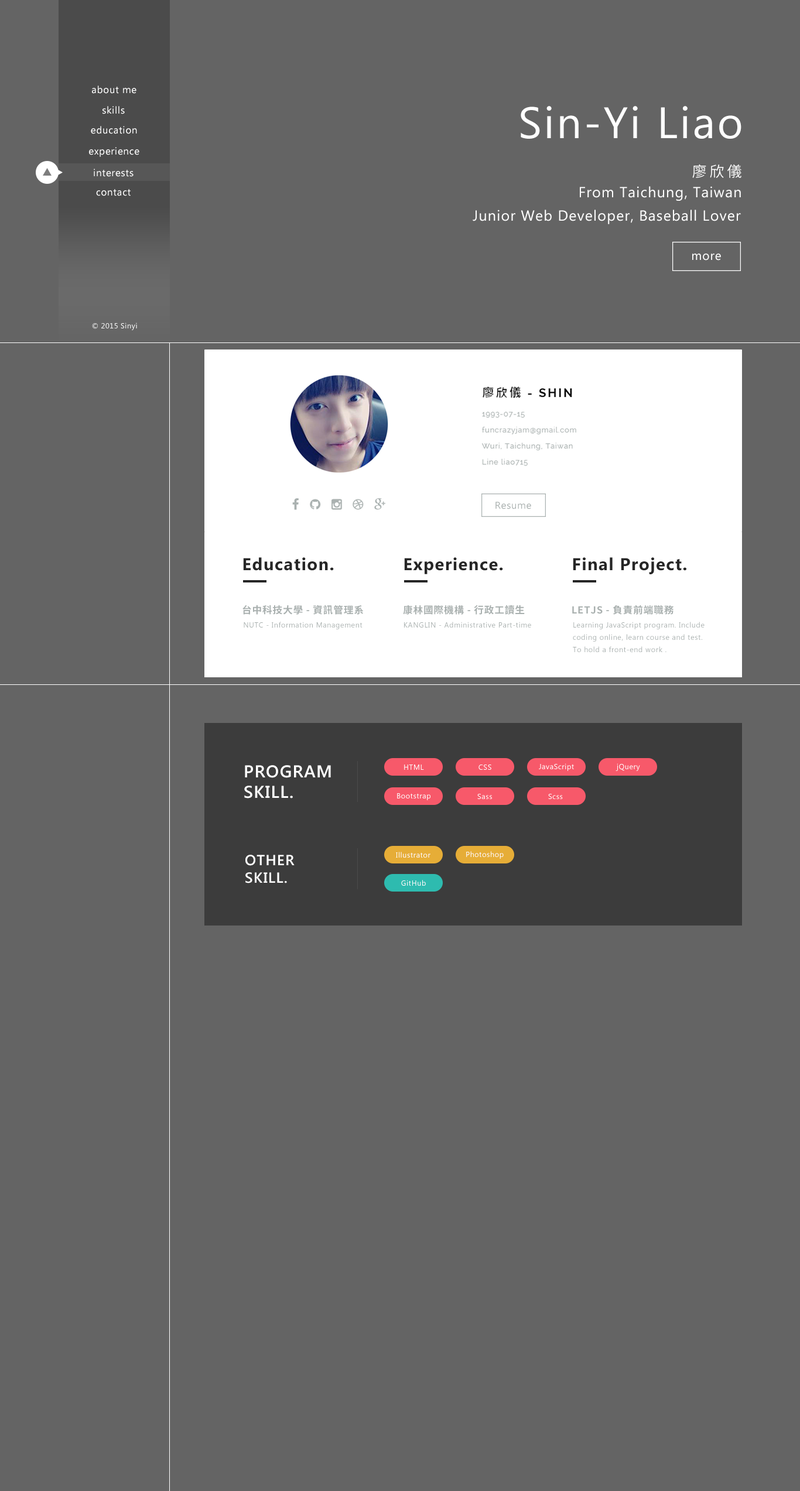
<style>
.page{position:relative;width:800px;height:1491px;background:#646464}
.page>*{position:absolute;margin:0}
.t1{font:9.8px "SegoeUI";letter-spacing:0.05em;color:#ffffff}
.t2{font:43.9px "SegoeUI";letter-spacing:0.05em;color:#ffffff}
.t3{font:14.6px "SourceHanSansTWHK-Normal";letter-spacing:0.2em;color:#ffffff}
.t4{font:14.6px "SegoeUI";letter-spacing:0.05em;color:#ffffff}
.t5{font:12.2px "SegoeUI";letter-spacing:0.05em;color:#ffffff}
.t6{font:7.3px "SegoeUI";letter-spacing:0.05em;color:#ffffff}
.t7{font:9.8px "SegoeUI";letter-spacing:0.05em;color:#abb2b1}
.t8{font:17.1px "SegoeUI-Bold";letter-spacing:0.05em;color:#262626}
.t9{font:9.8px "SourceHanSansTWHK-Bold";letter-spacing:0.05em;color:#a9b0af}
.t10{font:7.3px "SegoeUI";letter-spacing:0.05em;color:#a9b0af}
.t11{font:17.1px "SegoeUI-SemiBold";letter-spacing:0.05em;color:#ffffff}
.t12{font:14.6px "SegoeUI-SemiBold";letter-spacing:0.05em;color:#ffffff}
</style>
<div class="page">
<p class="t1" style="left:92px;top:85px;width:44px;height:9px">about me</p>
<p class="t1" style="left:102px;top:106px;width:23px;height:8px">skills</p>
<p class="t2" style="left:520px;top:106px;width:221px;height:33px">Sin-Yi Liao</p>
<p class="t1" style="left:91px;top:126px;width:46px;height:8px">education</p>
<p class="t1" style="left:89px;top:147px;width:50px;height:10px">experience</p>
<p class="t1" style="left:94px;top:169px;width:39px;height:8px">interests</p>
<p class="t3" style="left:692px;top:164px;width:49px;height:14px">廖欣儀</p>
<p class="t1" style="left:96px;top:189px;width:35px;height:7px">contact</p>
<p class="t4" style="left:580px;top:186px;width:161px;height:15px">From Taichung, Taiwan</p>
<p class="t4" style="left:472px;top:210px;width:269px;height:14px">Junior Web Developer, Baseball Lover</p>
<p class="t5" style="left:692px;top:253px;width:29px;height:8px">more</p>
<p class="t6" style="left:92px;top:323px;width:45px;height:7px">© 2015 Sinyi</p>
<p class="t7" style="left:495px;top:502px;width:36px;height:7px">Resume</p>
<p class="t8" style="left:243px;top:557px;width:91px;height:14px">Education.</p>
<p class="t8" style="left:404px;top:557px;width:99px;height:17px">Experience.</p>
<p class="t8" style="left:573px;top:557px;width:113px;height:17px">Final Project.</p>
<p class="t9" style="left:242px;top:605px;width:121px;height:10px">台中科技大學 - 資訊管理系</p>
<p class="t9" style="left:403px;top:605px;width:122px;height:10px">康林國際機構 - 行政工讀生</p>
<p class="t9" style="left:572px;top:605px;width:102px;height:10px">LETJS - 負責前端職務</p>
<p class="t10" style="left:244px;top:622px;width:118px;height:7px">NUTC - Information Management</p>
<p class="t10" style="left:404px;top:622px;width:127px;height:6px">KANGLIN - Administrative Part-time</p>
<p class="t10" style="left:573px;top:622px;width:131px;height:7px">Learning JavaScript program. Include</p>
<p class="t10" style="left:573px;top:634px;width:129px;height:8px">coding online, learn course and test.</p>
<p class="t10" style="left:573px;top:646px;width:93px;height:6px">To hold a front-end work .</p>
<p class="t11" style="left:244px;top:765px;width:87px;height:34px">PROGRAM<br>SKILL.</p>
<p class="t6" style="left:404px;top:765px;width:20px;height:5px">HTML</p>
<p class="t6" style="left:478px;top:765px;width:13px;height:5px">CSS</p>
<p class="t6" style="left:539px;top:763px;width:35px;height:8px">JavaScript</p>
<p class="t6" style="left:615px;top:763px;width:25px;height:8px">jQuery</p>
<p class="t6" style="left:397px;top:793px;width:33px;height:7px">Bootstrap</p>
<p class="t6" style="left:477px;top:794px;width:15px;height:5px">Sass</p>
<p class="t6" style="left:548px;top:794px;width:15px;height:5px">Scss</p>
<p class="t12" style="left:245px;top:855px;width:49px;height:28px">OTHER<br>SKILL.</p>
<p class="t6" style="left:396px;top:852px;width:34px;height:6px">Illustrator</p>
<p class="t6" style="left:466px;top:851px;width:37px;height:8px">Photoshop</p>
<p class="t6" style="left:401px;top:880px;width:25px;height:6px">GitHub</p>
</div>
